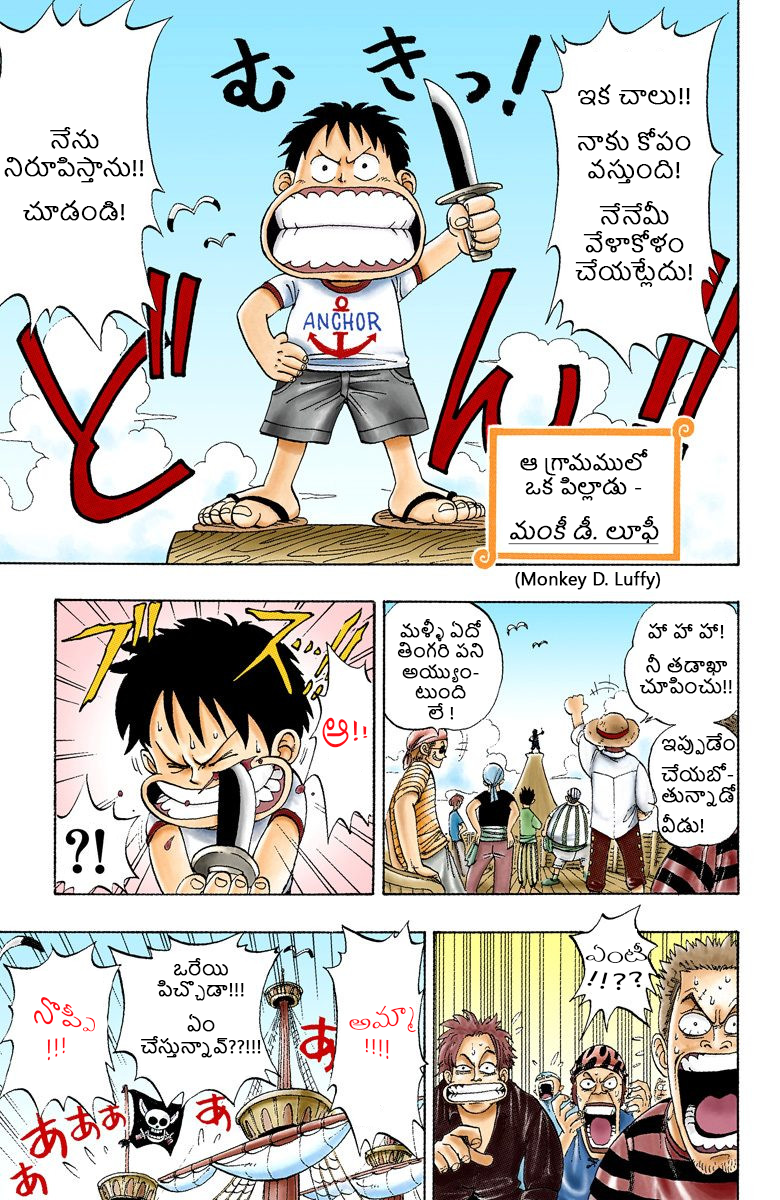
<style>
.page{position:relative;width:780px;height:1200px;background:#ffffff}
.page>*{position:absolute;margin:0}
.t1{font:23px "NirmalaUI";color:#000000;font-weight:bold}
.t2{font:20px "NirmalaUI";color:#000000;font-weight:bold}
.t3{font:22px "NirmalaUI";color:#000000;font-weight:bold;font-style:italic;text-decoration:underline}
.t4{font:18px "NirmalaUI";color:#000000;font-weight:bold}
.t5{font:17.2px "NirmalaUI";color:#000000;font-weight:bold}
.t6{font:33px "NirmalaUI";color:#fd0f18}
.t7{font:20px "NirmalaUI";color:#000000}
.t8{font:26px "NirmalaUI";color:#fd0f18}
.t9{font:24px "NirmalaUI";color:#fd0f18}
</style>
<div class="page">
<p class="t1" style="left:575px;top:84px;width:117px;height:203px;text-align:center">ఇక చాలు!! <br> <br>నాకు కోపం వస్తుంది!<br> <br>నేనేమీ వేళాకోళం చేయట్లేదు!</p>
<p class="t1" style="left:4px;top:127px;width:140px;height:94px;text-align:center">నేను నిరూపిస్తాను!! <br> <br>చూడండి!</p>
<p class="t2" style="left:508px;top:449px;width:151px;height:96px;text-align:center">ఆ గ్రామములో ఒక పిల్లాడు -<br> <br><span class="t3">మంకీ డీ. లూఫీ</span></p>
<p class="t4" style="left:515px;top:571px;width:146px;height:19px">(Monkey D. Luffy)</p>
<p class="t5" style="left:397px;top:619px;width:87px;height:101px;text-align:center">మళ్ళీ ఏదో తింగరి పని అయ్యుం-<br>టుంది <br>లే !</p>
<p class="t4" style="left:639px;top:623px;width:93px;height:71px;text-align:center">హా హా హా!<br> <br>నీ తడాఖా చూపించు!!</p>
<p class="t6" style="left:322px;top:717px;width:46px;height:31px">ఆ!!v</p>
<p class="t4" style="left:661px;top:733px;width:75px;height:100px">ఇప్పుడేం<br> <br>చేయబో-తున్నాడో<br> <br>వీడు!</p>
<p class="t7" style="left:585px;top:942px;width:63px;height:49px;text-align:center">ఏంటీ<br>!!??</p>
<p class="t4" style="left:140px;top:958px;width:121px;height:100px;text-align:center">ఒరేయి పిచ్చొడా!!! <br> <br>ఏం చేస్తున్నావ్??!!!</p>
<p class="t8" style="left:34px;top:997px;width:61px;height:64px;text-align:center">నొప్పీ<br>!!!<br>!!!!</p>
<p class="t9" style="left:349px;top:1005px;width:67px;height:54px;text-align:center">అమ్మా <br>!!!!</p>
</div>
